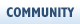
<style>
.page{position:relative;width:80px;height:24px}
.page>*{position:absolute;margin:0}
.t1{font:14px "Humanist521BT-BoldCondensed";color:#2d5078}
</style>
<div class="page">
<p class="t1" style="left:6px;top:7px;width:69px;height:10px">COMMUNITY</p>
</div>
